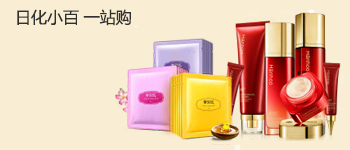
<style>
.page{position:relative;width:350px;height:150px;background:#f9eed4}
.page>*{position:absolute;margin:0}
.t1{font:16px "MicrosoftYaHei";color:#303030}
</style>
<div class="page">
<p class="t1" style="left:17px;top:9px;width:114px;height:17px">日化小百 一站购</p>
</div>
